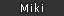
<style>
.page{position:relative;width:64px;height:16px;background:#333333}
.page>*{position:absolute;margin:0}
.t1{font:11px "LucidaSans";letter-spacing:0.1em;color:#ffffff}
</style>
<div class="page">
<p class="t1" style="left:21px;top:3px;width:22px;height:9px">Miki</p>
</div>
